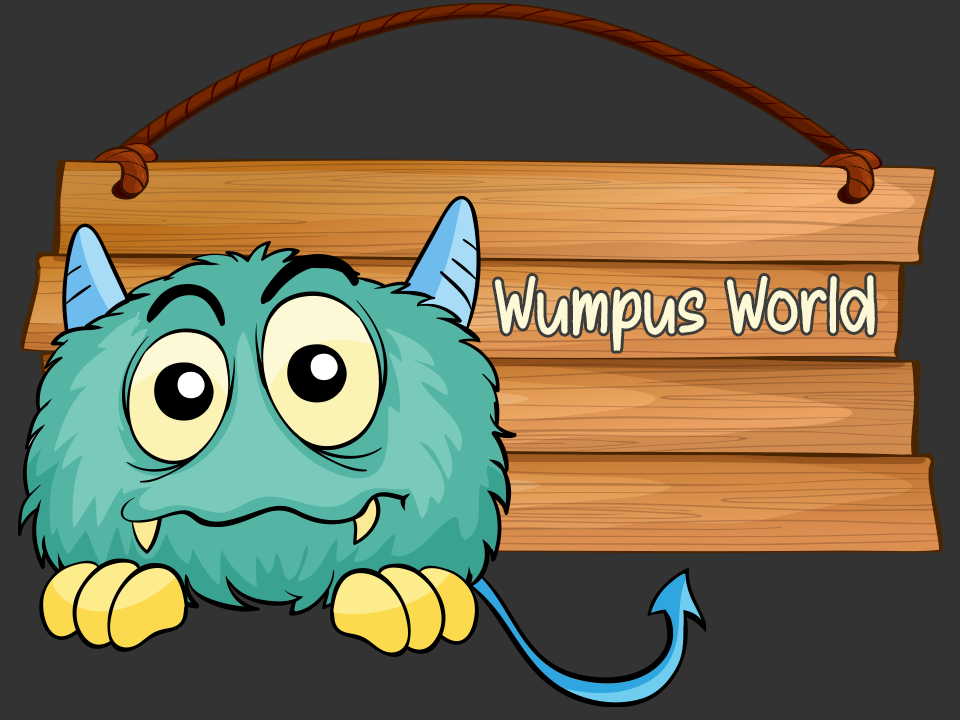
<style>
.page{position:relative;width:960px;height:720px;background:#333333}
.page>*{position:absolute;margin:0}
.t1{font:82px "CoffeeRegular";color:#fdf9d6}
</style>
<div class="page">
<p class="t1" style="left:495px;top:275px;width:380px;height:76px">Wumpus World</p>
</div>
